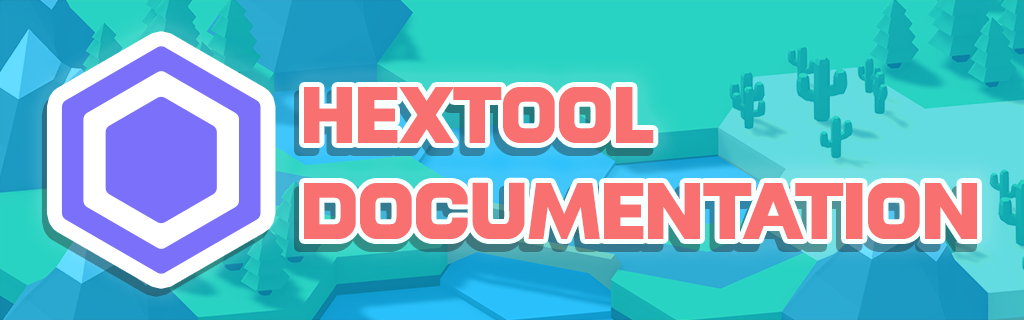
<style>
.page{position:relative;width:1024px;height:320px}
.page>*{position:absolute;margin:0}
.t1{font:80px "HXNBlack";letter-spacing:-0.02em;color:#f97070}
</style>
<div class="page">
<p class="t1" style="left:304px;top:87px;width:673px;height:152px">HexTool<br>Documentation</p>
</div>
